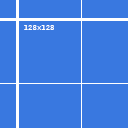
<style>
.page{position:relative;width:128px;height:128px;background:#3978e0}
.page>*{position:absolute;margin:0}
.t1{font:8px "Consolas";color:#ffffff}
</style>
<div class="page">
<p class="t1" style="left:24px;top:25px;width:30px;height:5px">128x128</p>
</div>
